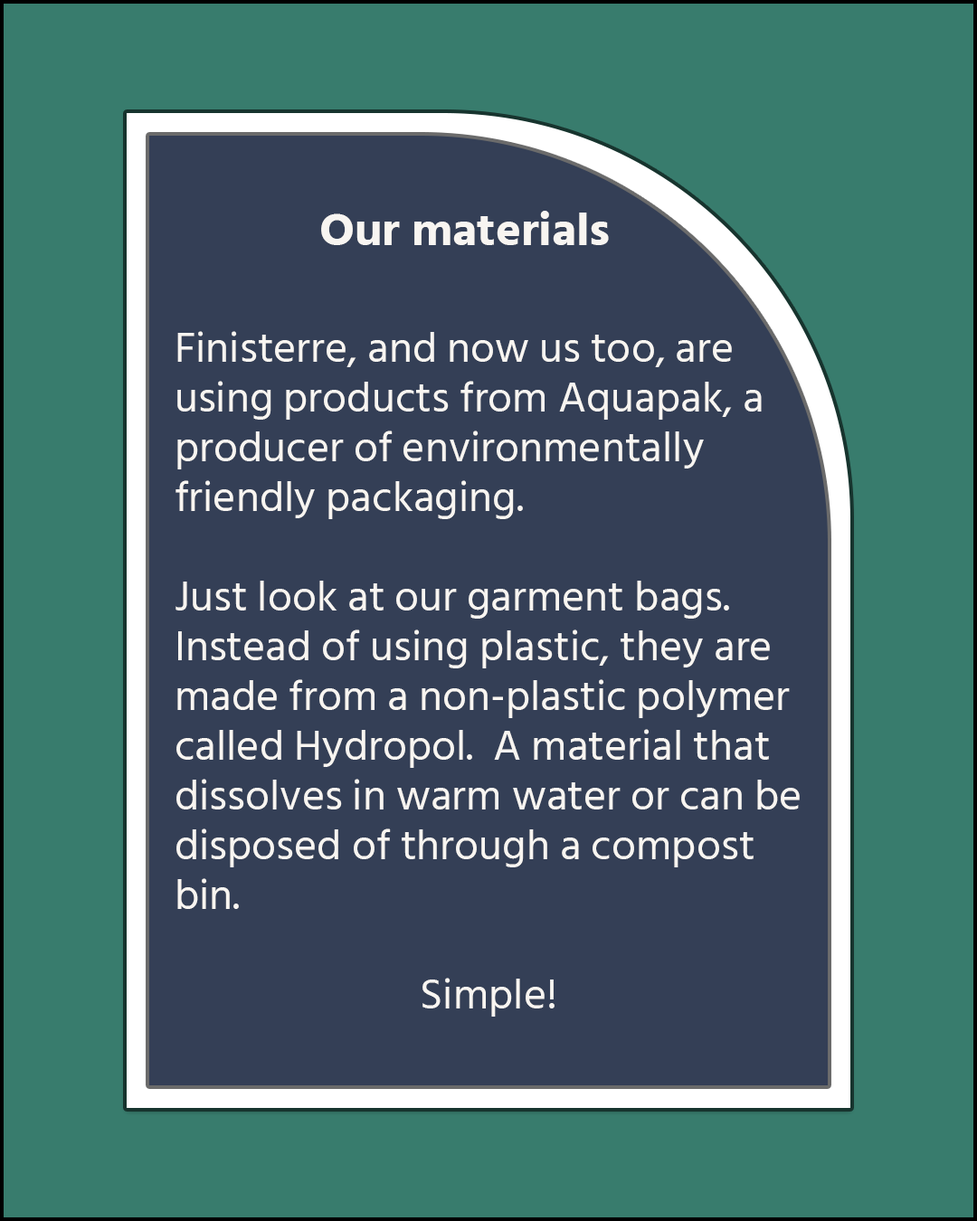
<style>
.page{position:relative;width:977px;height:1221px;background:#387c6d}
.page>*{position:absolute;margin:0}
.t1{font:45.2px "HindSiliguri-Bold";color:#f8f5f1;scale:1.05 1}
.t2{font:41.4px "HindSiliguri-Regular";color:#f8f5f1;scale:1.05 1}
</style>
<div class="page">
<p class="t1" style="left:321px;top:211px;width:288px;height:34px">Our materials</p>
<p class="t2" style="left:175px;top:331px;width:624px;height:685px">Finisterre, and now us too, are using products from Aquapak, a producer of environmentally friendly packaging.<br><br>Just look at our garment bags. Instead of using plastic, they are made from a non-plastic polymer called Hydropol.  A material that dissolves in warm water or can be disposed of through a compost bin.<br><br>Simple!</p>
</div>
